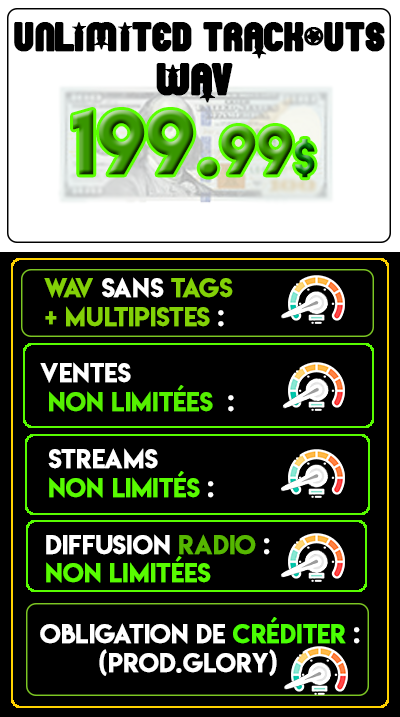
<style>
.page{position:relative;width:400px;height:717px;background:#000000}
.page>*{position:absolute;margin:0}
.t1{font:44.3px "Pornstar";color:#000000;text-transform:uppercase;font-weight:bold}
.t2{font:48px "Pornstar";color:#000000;text-transform:uppercase;font-weight:bold}
.t3{font:80.4px "LemonMilk";text-transform:uppercase;font-weight:bold}
.t4{font:60.3px "LemonMilk";text-transform:uppercase;font-weight:bold}
.t5{font:40.2px "LemonMilk";text-transform:uppercase;font-weight:bold}
.t6{font:24px "LemonMilk";color:#83d107;text-transform:uppercase;font-weight:bold}
.t7{font:24px "LemonMilk";color:#ffffff;text-transform:uppercase;font-weight:bold}
.t8{font:24px "LemonMilk";color:#55f000;text-transform:uppercase;font-weight:bold}
.t9{font:24px "LemonMilk";color:#58fb00;text-transform:uppercase;font-weight:bold}
.t10{font:24px "LemonMilk";color:#58fc00;text-transform:uppercase;font-weight:bold}
.t11{font:24px "LemonMilk";color:#56b700;text-transform:uppercase;font-weight:bold}
.t12{font:24px "LemonMilk";color:#4aff03;text-transform:uppercase;font-weight:bold}
</style>
<div class="page">
<p class="t1" style="left:14px;top:22px;width:371px;height:37px">unlimited trackouts</p>
<p class="t2" style="left:156px;top:63px;width:77px;height:40px">wav</p>
<p class="t3" style="left:73px;top:110px;width:242px;height:68px">199.<span class="t4">99</span><span class="t5">$</span></p>
<p class="t6" style="left:44px;top:277px;width:189px;height:50px">wav<span class="t7"> sans </span>tags <br>+ multipistes<span class="t7"> :</span></p>
<p class="t8" style="left:40px;top:362px;width:194px;height:50px"><span class="t7">ventes<br></span> non limitées<span class="t7">  :</span></p>
<p class="t9" style="left:48px;top:448px;width:166px;height:50px"><span class="t7">streams <br></span>non limités<span class="t7"> :</span></p>
<p class="t10" style="left:46px;top:534px;width:224px;height:49px"><span class="t7">diffusion </span><span class="t11">radio</span><span class="t7"> : <br></span>non limitées</p>
<p class="t7" style="left:40px;top:617px;width:320px;height:59px">obligation de <span class="t12">créditer</span> :<br>        (prod.glory)</p>
</div>
